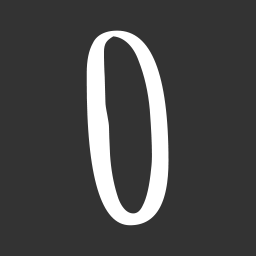
<style>
.page{position:relative;width:256px;height:256px;background:#333333}
.page>*{position:absolute;margin:0}
.t1{font:256px "AmaticSC-Bold";color:#ffffff;font-variant:small-caps;scale:1.4 1}
</style>
<div class="page">
<p class="t1" style="left:86px;top:30px;width:83px;height:196px">0</p>
</div>
